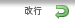
<style>
.page{position:relative;width:75px;height:20px;background:#ffffff}
.page>*{position:absolute;margin:0}
.t1{font:9px "HiraKakuPro-W3";color:#636363}
</style>
<div class="page">
<p class="t1" style="left:24px;top:6px;width:18px;height:9px">改行</p>
</div>
